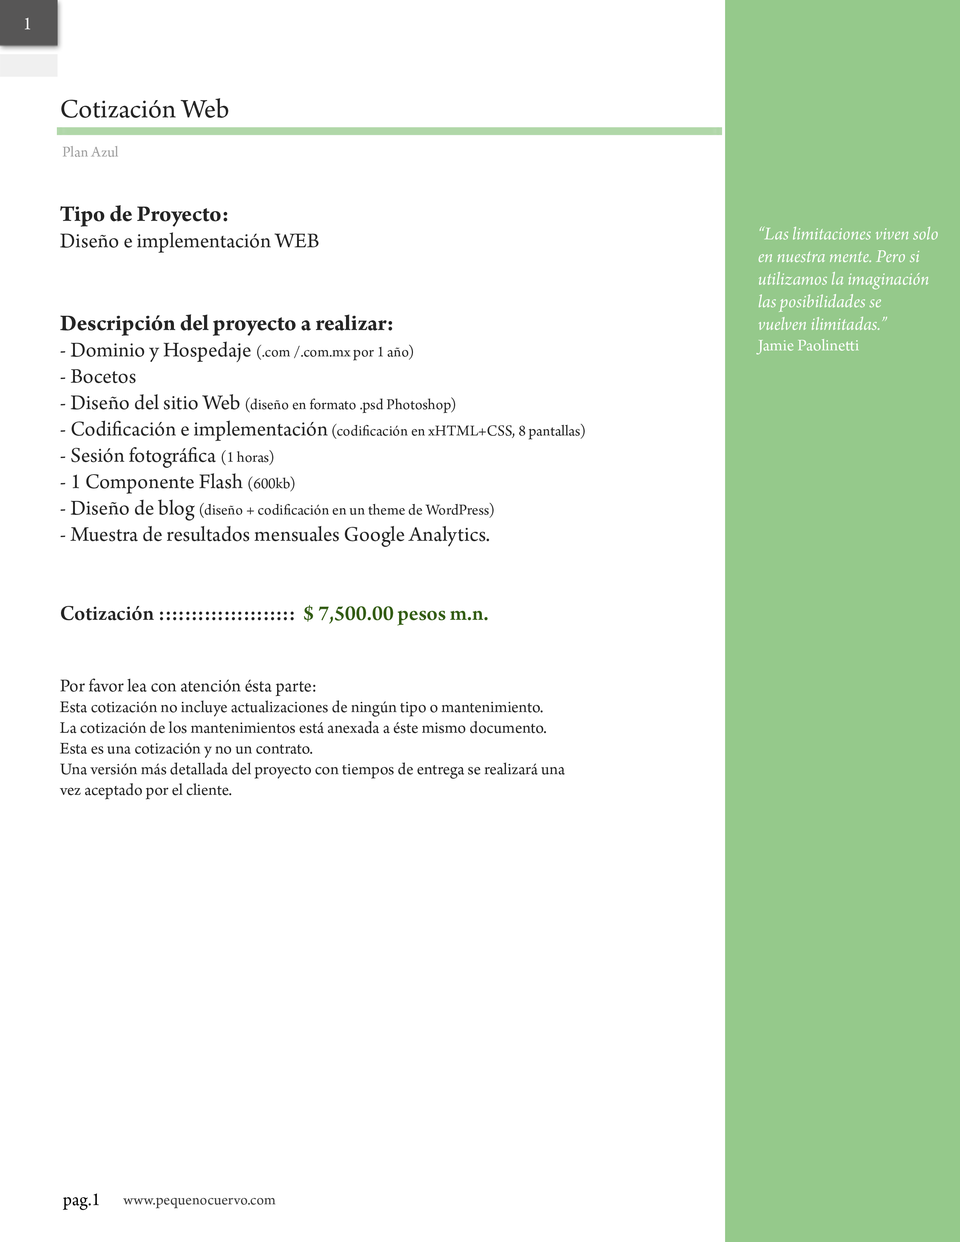
<style>
.page{position:relative;width:960px;height:1242px;background:#ffffff}
.page>*{position:absolute;margin:0}
.t1{font:18.8px "ArnoPro-Regular";color:#fcfcfc}
.t2{font:28.2px "ArnoPro-Regular";color:#252525}
.t3{font:15.7px "ArnoPro-Regular";color:#a0a0a0}
.t4{font:17.3px "ArnoPro-Regular";color:#252525}
.t5{font:23.5px "ArnoPro-Regular";color:#252525}
.t6{font:23.5px "ArnoPro-Bold";color:#252525}
.t7{font:22px "ArnoPro-Regular";color:#252525}
.t8{font:15.7px "ArnoPro-Regular";color:#252525}
.t9{font:22px "ArnoPro-Smbd";color:#252525}
.t10{font:22px "ArnoPro-Smbd";color:#325c13}
.t11{font:18.8px "ArnoPro-Regular";color:#252525}
.t12{font:18.8px "ArnoPro-Italic";color:#ffffff}
.t13{font:17.3px "ArnoPro-Regular";color:#ffffff}
.t14{font:18.8px "ArnoPro-Regular";color:#010101}
.t15{font:15.7px "ArnoPro-Regular";color:#3c3c3c}
</style>
<div class="page">
<p class="t1" style="left:25px;top:18px;width:5px;height:11px">1</p>
<p class="t2" style="left:61px;top:98px;width:167px;height:20px">Cotización Web</p>
<p class="t3" style="left:62px;top:146px;width:56px;height:11px">Plan Azul</p>
<p class="t4" style="left:59px;top:205px;width:526px;height:595px"><span class="t5"><br></span><span class="t6">Tipo de Proyecto: <br></span><span class="t7">Diseño e implementación WEB<br><br><br></span><span class="t6">Descripción del proyecto a realizar:<br></span><span class="t7">- Dominio y Hospedaje </span><span class="t8">(.com /.com.mx por 1 año)<br></span><span class="t7">- Bocetos<br>- Diseño del sitio Web </span><span class="t8">(diseño en formato .psd Photoshop)<br></span><span class="t7">- Codificación e implementación</span><span class="t8"> (codificación en xHTML+CSS, 8 pantallas)<br></span><span class="t7">- Sesión fotográfica </span><span class="t8">(1 horas)<br></span><span class="t7">- 1 Componente Flash </span><span class="t8">(600kb)<br></span><span class="t7">- Diseño de blog </span><span class="t8">(diseño + codificación en un theme de WordPress)<br></span><span class="t7">- Muestra de resultados mensuales Google Analytics.<br><br><br></span><span class="t9">Cotización :::::::::::::::::::::  </span><span class="t10">$ 7,500.00 pesos m.n.<br><br></span><span class="t11"><br>Por favor lea con atención ésta parte:<br></span>Esta cotización no incluye actualizaciones de ningún tipo o mantenimiento.<br>La cotización de los mantenimientos está anexada a éste mismo documento.<br>Esta es una cotización y no un contrato.<br>Una versión más detallada del proyecto con tiempos de entrega se realizará una <br>vez aceptado por el cliente.</p>
<p class="t12" style="left:756px;top:226px;width:182px;height:129px">“Las limitaciones viven solo<br>en nuestra mente. Pero si <br>utilizamos la imaginación<br>las posibilidades se<br>vuelven ilimitadas.”<br><span class="t13">Jamie Paolinetti</span></p>
<p class="t14" style="left:63px;top:1194px;width:36px;height:16px">pag.1</p>
<p class="t15" style="left:123px;top:1198px;width:153px;height:11px">www.pequenocuervo.com</p>
</div>
